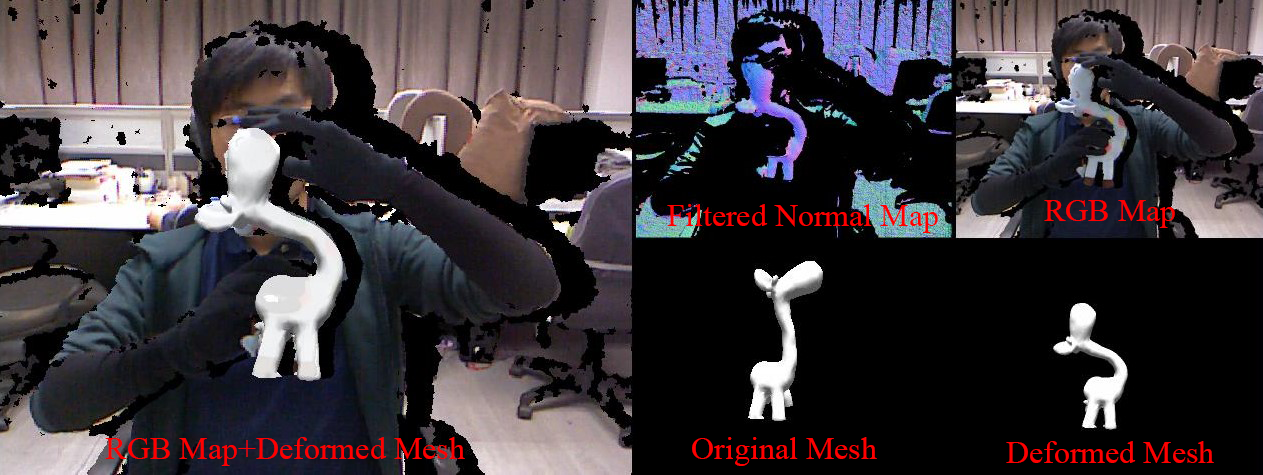
<style>
.page{position:relative;width:1263px;height:475px;background:#000000}
.page>*{position:absolute;margin:0}
.t1{font:32px "TimesNewRomanPSMT";color:#ff0000}
</style>
<div class="page">
<p class="t1" style="left:667px;top:204px;width:271px;height:29px">Filtered Normal Map</p>
<p class="t1" style="left:1044px;top:200px;width:131px;height:28px">RGB Map</p>
<p class="t1" style="left:105px;top:437px;width:360px;height:29px">RGB Map+Deformed Mesh</p>
<p class="t1" style="left:692px;top:437px;width:185px;height:29px">Original Mesh</p>
<p class="t1" style="left:1006px;top:441px;width:208px;height:22px">Deformed Mesh</p>
</div>
